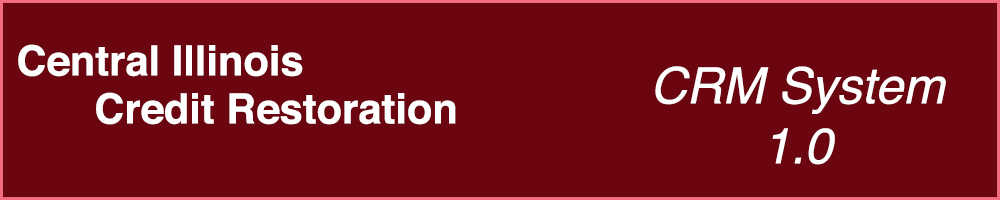
<style>
.page{position:relative;width:1000px;height:200px;background:#6b0610}
.page>*{position:absolute;margin:0}
.t1{font:41.7px "Helvetica-Bold";color:#ffffff}
.t2{font:50px "Helvetica-Oblique";color:#ffffff}
</style>
<div class="page">
<p class="t1" style="left:18px;top:44px;width:285px;height:33px">Central Illinois</p>
<p class="t2" style="left:655px;top:66px;width:291px;height:99px;text-align:center">CRM System<br>1.0</p>
<p class="t1" style="left:96px;top:92px;width:360px;height:33px">Credit Restoration</p>
</div>
